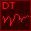
<style>
.page{position:relative;width:31px;height:31px;background:#320000}
.page>*{position:absolute;margin:0}
.t1{font:10px "rktr7rg";color:#ff0000}
</style>
<div class="page">
<p class="t1" style="left:2px;top:2px;width:13px;height:7px">DT</p>
</div>
